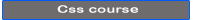
<style>
.page{position:relative;width:224px;height:20px;background:#6e6c6c}
.page>*{position:absolute;margin:0}
.t1{font:10.2px "ArialRoundedMTBold";color:#fcfcfc;scale:1.47 1}
</style>
<div class="page">
<p class="t1" style="left:57px;top:5px;width:81px;height:8px">Css course</p>
</div>
